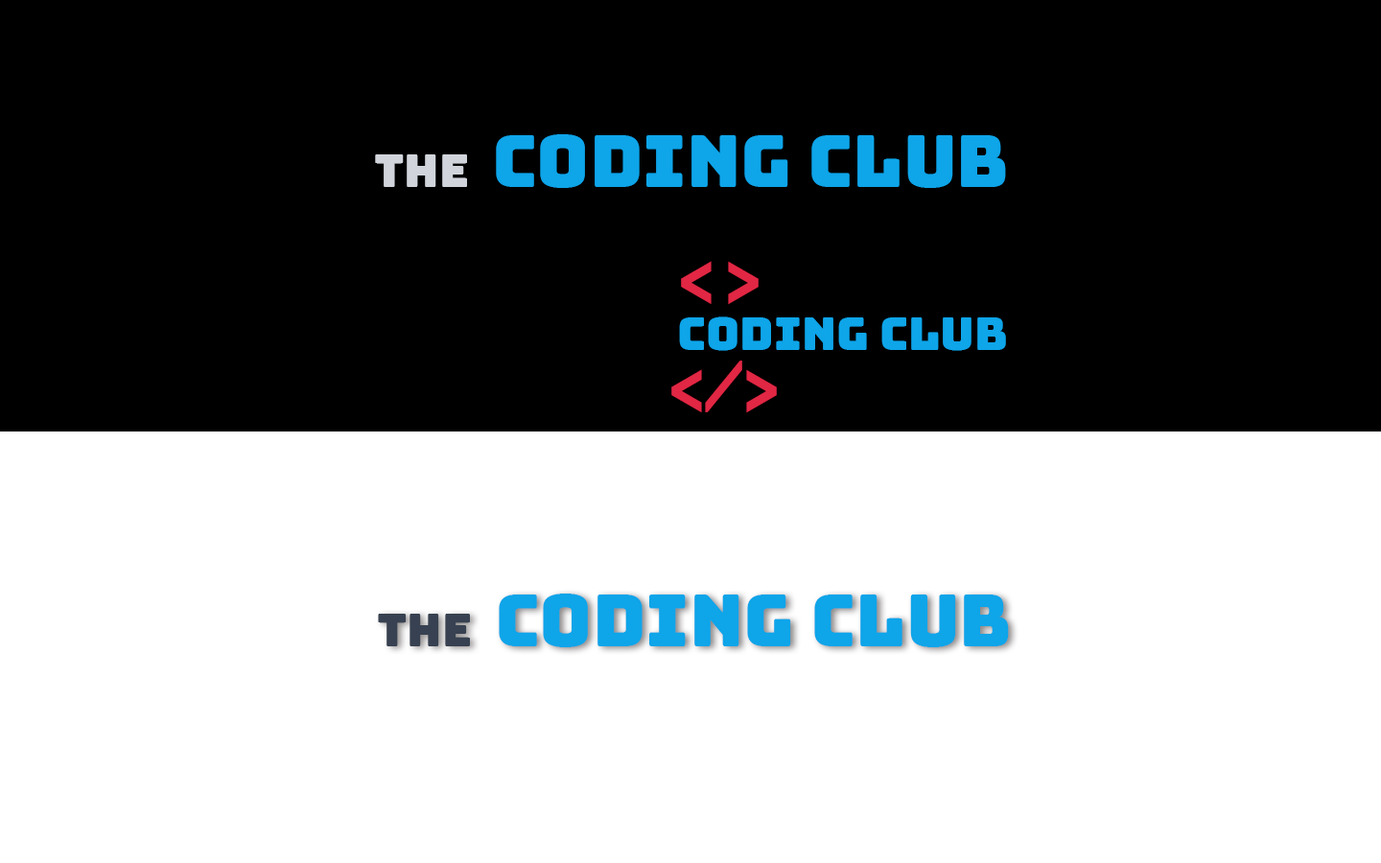
<style>
.page{position:relative;width:1381px;height:863px;background:#000000}
.page>*{position:absolute;margin:0}
.t1{font:71.9px "Bungee-Regular";color:#0ea5e9}
.t2{font:46px "Bungee-Regular";color:#d1d5db}
.t3{font:71.9px "Orbitron-SemiBold";color:#e12744}
.t4{font:46px "Bungee-Regular";color:#0ea5e9}
.t5{font:46px "Bungee-Regular";color:#374151}
</style>
<div class="page">
<p class="t1" style="left:496px;top:134px;width:510px;height:54px">coding club</p>
<p class="t2" style="left:375px;top:154px;width:92px;height:33px">the</p>
<p class="t3" style="left:681px;top:261px;width:31px;height:43px">&lt;</p>
<p class="t3" style="left:728px;top:261px;width:31px;height:44px">&gt;</p>
<p class="t4" style="left:679px;top:317px;width:327px;height:34px">coding club</p>
<p class="t3" style="left:671px;top:361px;width:71px;height:51px">&lt;/</p>
<p class="t3" style="left:746px;top:369px;width:31px;height:44px">&gt;</p>
<p class="t1" style="left:499px;top:594px;width:510px;height:53px">coding club</p>
<p class="t5" style="left:378px;top:614px;width:92px;height:33px">the</p>
</div>
